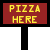
<style>
.page{position:relative;width:50px;height:50px;background:#ffffff}
.page>*{position:absolute;margin:0}
.t1{font:9px "OCRAStd";color:#ffee39}
</style>
<div class="page">
<p class="t1" style="left:9px;top:5px;width:31px;height:18px;text-align:center">PIZZA<br>HERE</p>
</div>
